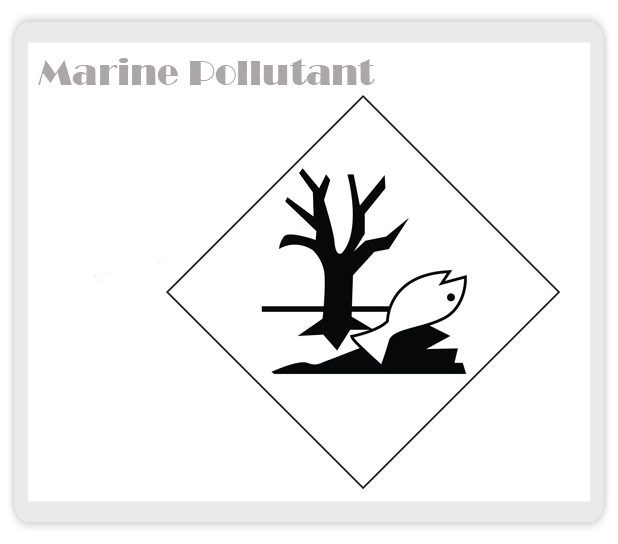
<style>
.page{position:relative;width:618px;height:544px;background:#ffffff}
.page>*{position:absolute;margin:0}
.t1{font:36px "Broadway";color:#aca7a7}
</style>
<div class="page">
<p class="t1" style="left:38px;top:58px;width:337px;height:27px">Marine Pollutant</p>
</div>
